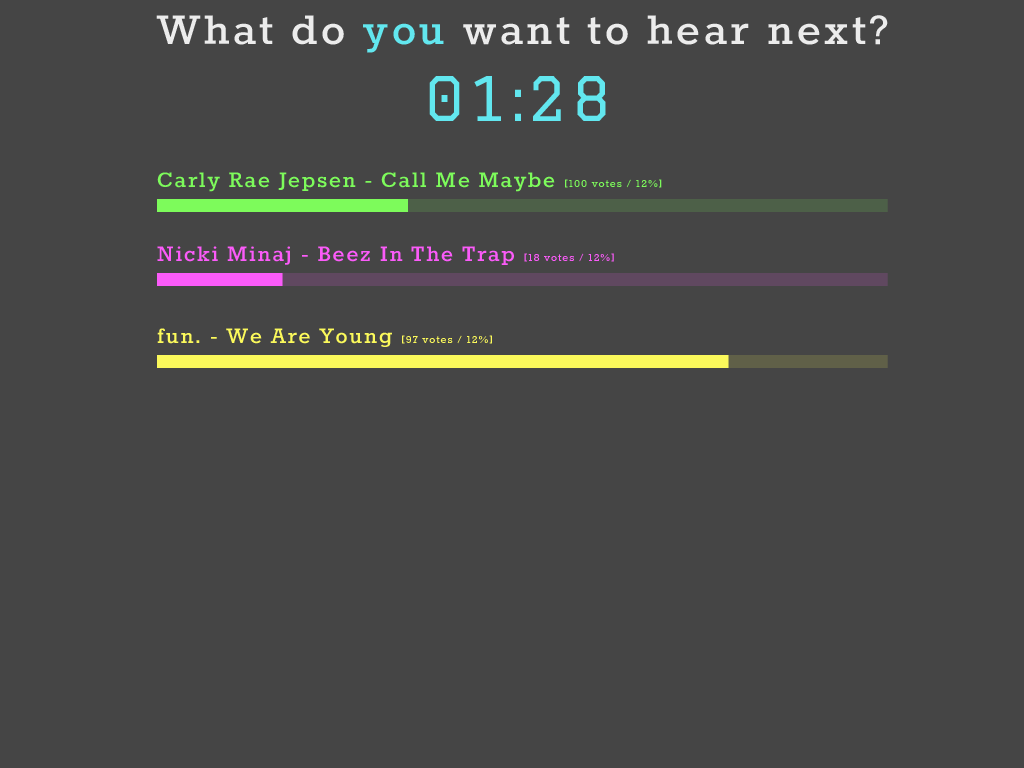
<style>
.page{position:relative;width:1024px;height:768px;background:#454545}
.page>*{position:absolute;margin:0}
.t1{font:48px "Rokkitt-Bold";letter-spacing:0.075em;color:#ececec}
.t2{font:48px "Rokkitt-Bold";letter-spacing:0.075em;color:#62e7ef}
.t3{font:60px "Graduate-Regular";letter-spacing:0.075em;color:#62e7ef}
.t4{font:24px "Rokkitt-Bold";letter-spacing:0.075em;color:#7dfb5b}
.t5{font:12px "Rokkitt-Bold";letter-spacing:0.075em;color:#7dfb5b}
.t6{font:24px "Rokkitt-Bold";letter-spacing:0.075em;color:#fb5bf9}
.t7{font:12px "Rokkitt-Bold";letter-spacing:0.075em;color:#fb5bf9}
.t8{font:24px "Rokkitt-Bold";letter-spacing:0.075em;color:#fbf95b}
.t9{font:12px "Rokkitt-Bold";letter-spacing:0.075em;color:#fbf95b}
</style>
<div class="page">
<p class="t1" style="left:156px;top:15px;width:732px;height:38px">What do <span class="t2">you</span> want to hear next?</p>
<p class="t3" style="left:429px;top:76px;width:177px;height:45px">01:28</p>
<p class="t4" style="left:157px;top:172px;width:505px;height:20px">Carly Rae Jepsen - Call Me Maybe <span class="t5">[100 votes / 12%]</span></p>
<p class="t6" style="left:157px;top:246px;width:457px;height:19px">Nicki Minaj - Beez In The Trap <span class="t7">[18 votes / 12%]</span></p>
<p class="t8" style="left:157px;top:328px;width:335px;height:19px">fun. - We Are Young <span class="t9">[97 votes / 12%]</span></p>
</div>
